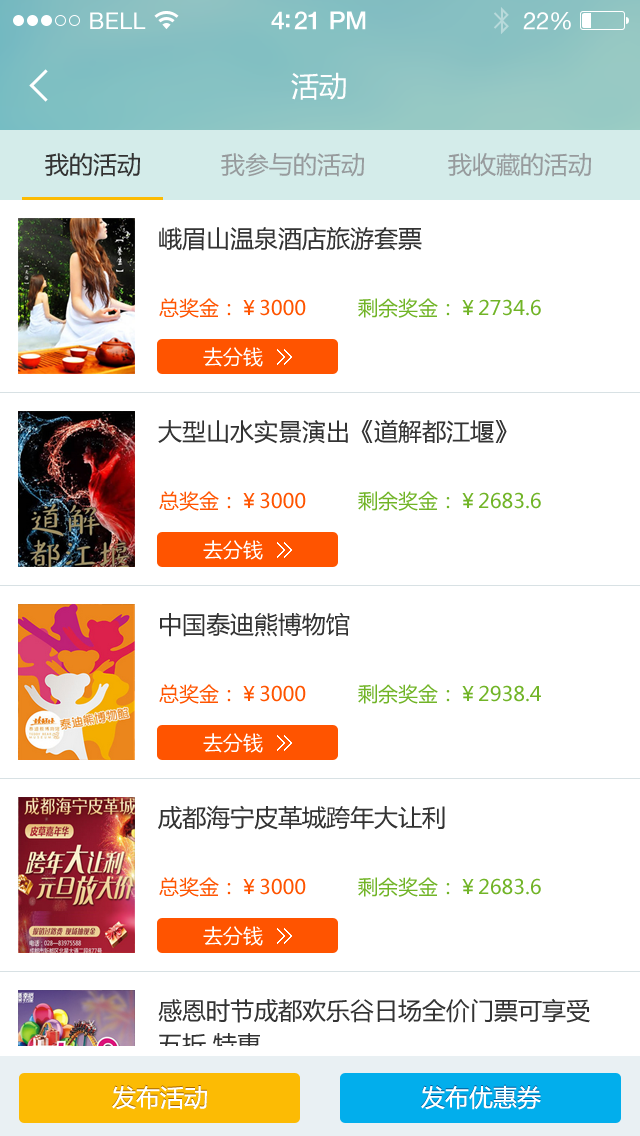
<style>
.page{position:relative;width:640px;height:1136px;background:#ffffff}
.page>*{position:absolute;margin:0}
.t1{font:23px "HelveticaNeue";letter-spacing:0.02em;color:#ffffff}
.t2{font:25px "HelveticaNeue-Medium";letter-spacing:-0.02em;color:#ffffff}
.t3{font:24px "HelveticaNeue";letter-spacing:-0.02em;color:#ffffff}
.t4{font:28px "MicrosoftYaHei";color:#ffffff}
.t5{font:24px "MicrosoftYaHei";color:#333333}
.t6{font:24px "MicrosoftYaHei";color:#979b9d}
.t7{font:20px "MicrosoftYaHei";color:#ff5400}
.t8{font:20px "MicrosoftYaHei";color:#71b427}
.t9{font:20px "MicrosoftYaHei";color:#ffffff}
.t10{font:24px/34px "MicrosoftYaHei";color:#333333}
.t11{font:24px "MicrosoftYaHei";color:#ffffff}
</style>
<div class="page">
<p class="t1" style="left:90px;top:12px;width:56px;height:17px">BELL</p>
<p class="t2" style="left:271px;top:11px;width:95px;height:19px">4:21 PM</p>
<p class="t3" style="left:523px;top:12px;width:48px;height:18px">22%</p>
<p class="t4" style="left:291px;top:72px;width:55px;height:28px">活动</p>
<p class="t5" style="left:45px;top:153px;width:95px;height:24px">我的活动</p>
<p class="t6" style="left:221px;top:153px;width:143px;height:24px">我参与的活动</p>
<p class="t6" style="left:448px;top:153px;width:143px;height:24px">我收藏的活动</p>
<p class="t5" style="left:159px;top:226px;width:263px;height:25px">峨眉山温泉酒店旅游套票</p>
<p class="t7" style="left:159px;top:298px;width:147px;height:20px">总奖金：￥3000</p>
<p class="t8" style="left:358px;top:298px;width:183px;height:20px">剩余奖金：￥2734.6</p>
<p class="t9" style="left:203px;top:347px;width:60px;height:20px">去分钱</p>
<p class="t5" style="left:158px;top:419px;width:349px;height:25px">大型山水实景演出《道解都江堰》</p>
<p class="t7" style="left:159px;top:491px;width:147px;height:20px">总奖金：￥3000</p>
<p class="t8" style="left:358px;top:491px;width:183px;height:20px">剩余奖金：￥2683.6</p>
<p class="t9" style="left:203px;top:540px;width:60px;height:20px">去分钱</p>
<p class="t5" style="left:160px;top:612px;width:190px;height:25px">中国泰迪熊博物馆</p>
<p class="t7" style="left:159px;top:684px;width:147px;height:20px">总奖金：￥3000</p>
<p class="t8" style="left:358px;top:684px;width:183px;height:20px">剩余奖金：￥2938.4</p>
<p class="t9" style="left:203px;top:733px;width:60px;height:20px">去分钱</p>
<p class="t5" style="left:158px;top:805px;width:287px;height:25px">成都海宁皮革城跨年大让利</p>
<p class="t7" style="left:159px;top:877px;width:147px;height:20px">总奖金：￥3000</p>
<p class="t8" style="left:358px;top:877px;width:183px;height:20px">剩余奖金：￥2683.6</p>
<p class="t9" style="left:203px;top:926px;width:60px;height:20px">去分钱</p>
<p class="t10" style="left:158px;top:998px;width:432px;height:59px">感恩时节成都欢乐谷日场全价门票可享受<br>五折 特惠</p>
<p class="t11" style="left:112px;top:1085px;width:95px;height:25px">发布活动</p>
<p class="t11" style="left:421px;top:1085px;width:120px;height:25px">发布优惠券</p>
</div>
